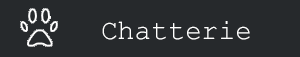
<style>
.page{position:relative;width:300px;height:57px;background:#26292c}
.page>*{position:absolute;margin:0}
.t1{font:28px "CourierNewPSMT";color:#ffffff}
</style>
<div class="page">
<p class="t1" style="left:102px;top:21px;width:148px;height:19px">Chatterie</p>
</div>
